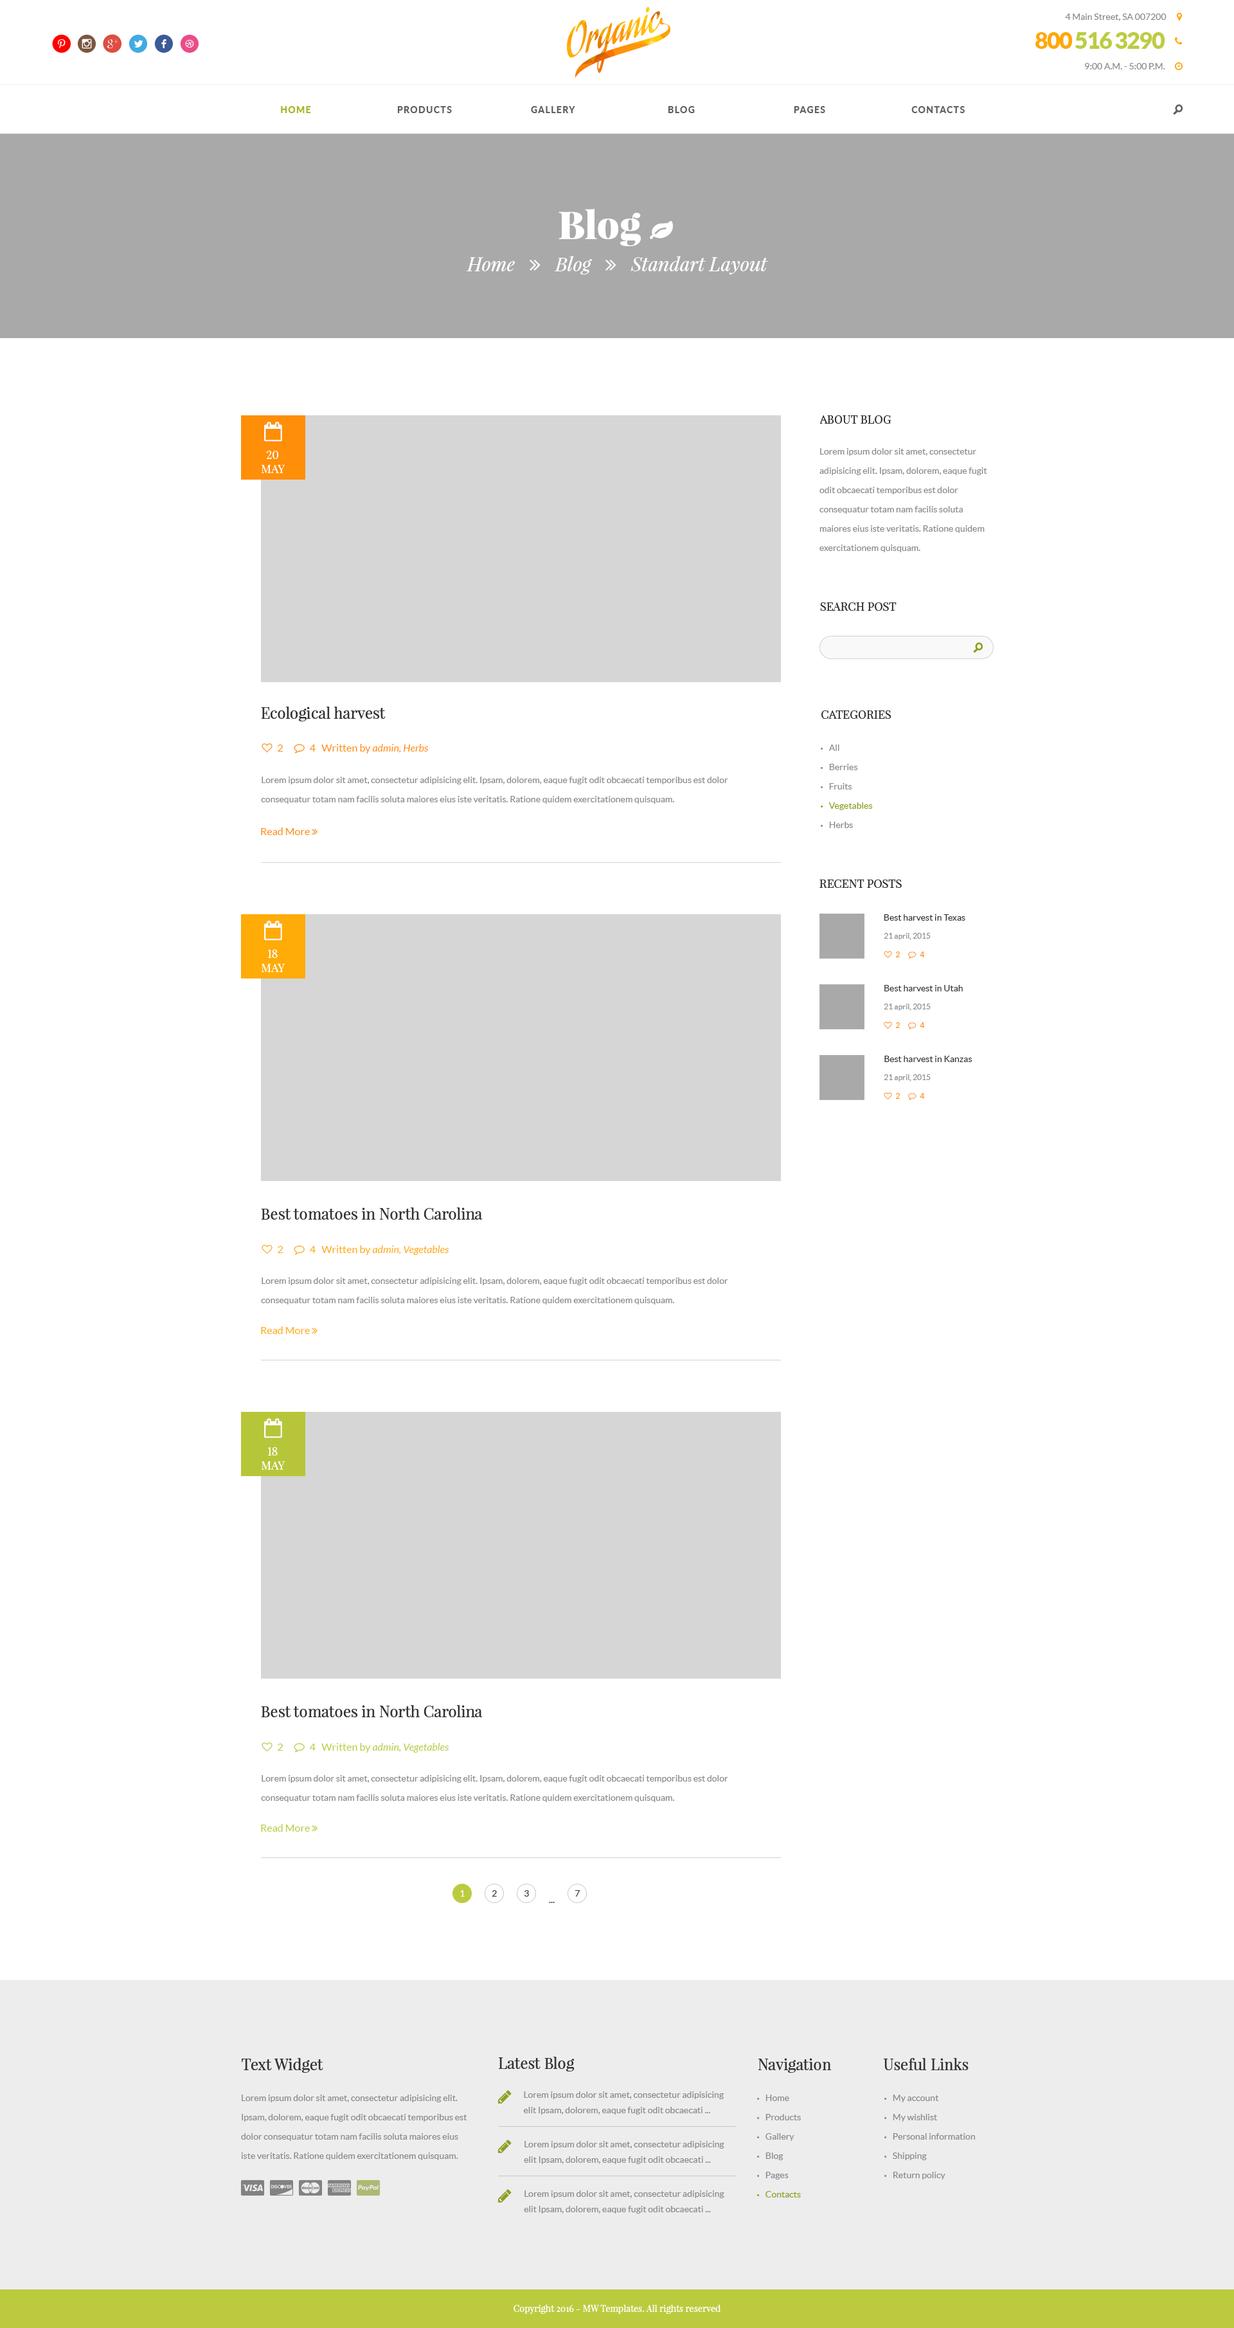
<style>
.page{position:relative;width:1234px;height:2328px;background:#ffffff}
.page>*{position:absolute;margin:0}
.t1{font:9px "Lato-Regular";color:#898989}
.t2{font:25.7px "SocialicoPlus";letter-spacing:0.2em;color:#ff0000}
.t3{font:25.7px "SocialicoPlus";letter-spacing:0.2em;color:#7c5641}
.t4{font:25.7px "SocialicoPlus";letter-spacing:0.2em;color:#dd4e41}
.t5{font:25.7px "Socialico";letter-spacing:0.2em;color:#41abe1}
.t6{font:25.7px "Socialico";letter-spacing:0.2em;color:#3d5a98}
.t7{font:25.7px "Socialico";letter-spacing:0.2em;color:#ea4c89}
.t8{font:23.1px "Lato-Black";letter-spacing:-0.05em;color:#bdcc41}
.t9{font:23.1px "Lato-Black";letter-spacing:-0.05em;color:#ffa800}
.t10{font:9px "Lato-Heavy";letter-spacing:0.1em;color:#a6b525;text-transform:uppercase}
.t11{font:9px "Lato-Heavy";letter-spacing:0.1em;color:#606060;text-transform:uppercase}
.t12{font:19.3px "SocialicoPlus";color:#606060;text-transform:uppercase}
.t13{font:11.6px "PlayfairDisplay-Regular";color:#333333;text-transform:uppercase}
.t14{font:9px/19.3px "Lato-Regular";color:#898989}
.t15{font:11.6px "PlayfairDisplay-Regular";color:#ffffff;text-transform:uppercase}
.t16{font:19.3px "SocialicoPlus";color:#909e1a;text-transform:uppercase}
.t17{font:15.4px "PlayfairDisplay-Regular";color:#333333}
.t18{font:9px/19.3px "Lato-Regular";color:#909e1a}
.t19{font:9px/19.3px "MyriadPro-Regular";color:#898989;text-transform:uppercase}
.t20{font:9px/19.3px "MyriadPro-Regular";color:#909e1a;text-transform:uppercase}
.t21{font:9px "Lato-Regular";color:#333333}
.t22{font:7.7px "Lato-Regular";color:#898989}
.t23{font:9px "Lato-Regular";color:#fffefe}
.t24{font:9px/15.4px "Lato-Regular";color:#898989}
.t25{font:9px "PlayfairDisplay-Regular";color:#ffffff}
</style>
<div class="page">
<p class="t1" style="left:1065px;top:14px;width:102px;height:7px">4 Main Street, SA 007200</p>
<p class="t2" style="left:52px;top:34px;width:147px;height:19px">p<span class="t3">i</span><span class="t4">h</span><span class="t5">l</span><span class="t6">f</span><span class="t7">d</span></p>
<p class="t8" style="left:1036px;top:32px;width:130px;height:17px"><span class="t9">800</span> 516 3290</p>
<p class="t1" style="left:1085px;top:63px;width:81px;height:6px">9:00 A.M. - 5:00 P.M.</p>
<p class="t10" style="left:281px;top:106px;width:30px;height:7px">Home</p>
<p class="t11" style="left:397px;top:106px;width:55px;height:7px">Products</p>
<p class="t11" style="left:531px;top:106px;width:44px;height:7px">Gallery</p>
<p class="t11" style="left:668px;top:106px;width:27px;height:7px">Blog</p>
<p class="t11" style="left:794px;top:106px;width:31px;height:7px">Pages</p>
<p class="t11" style="left:912px;top:106px;width:53px;height:7px">Contacts</p>
<p class="t12" style="left:1173px;top:104px;width:11px;height:10px">o</p>
<p class="t13" style="left:820px;top:415px;width:71px;height:9px">About blog</p>
<p class="t14" style="left:820px;top:448px;width:167px;height:104px">Lorem ipsum dolor sit amet, consectetur adipisicing elit. Ipsam, dolorem, eaque fugit odit obcaecati temporibus est dolor consequatur totam nam facilis soluta maiores eius iste veritatis. Ratione quidem exercitationem quisquam.</p>
<p class="t15" style="left:262px;top:451px;width:23px;height:22px;text-align:center">20<br>may</p>
<p class="t13" style="left:820px;top:602px;width:77px;height:9px">Search post</p>
<p class="t16" style="left:973px;top:642px;width:11px;height:10px">o</p>
<p class="t17" style="left:261px;top:706px;width:125px;height:15px">Ecological harvest</p>
<p class="t13" style="left:822px;top:710px;width:70px;height:9px">Categories</p>
<p class="t18" style="left:821px;top:744px;width:52px;height:84px"><span class="t19">•   </span><span class="t14">All<br></span><span class="t19">•   </span><span class="t14">Berries<br></span><span class="t19">•   </span><span class="t14">Fruits<br></span><span class="t20">•   </span>Vegetables<br><span class="t19">•   </span><span class="t14">Herbs</span></p>
<p class="t14" style="left:261px;top:777px;width:467px;height:27px">Lorem ipsum dolor sit amet, consectetur adipisicing elit. Ipsam, dolorem, eaque fugit odit obcaecati temporibus est dolor consequatur totam nam facilis soluta maiores eius iste veritatis. Ratione quidem exercitationem quisquam.</p>
<p class="t13" style="left:820px;top:879px;width:82px;height:9px">RECENT POSTS</p>
<p class="t21" style="left:884px;top:914px;width:82px;height:7px">Best harvest in Texas</p>
<p class="t22" style="left:884px;top:933px;width:47px;height:7px">21 april, 2015</p>
<p class="t15" style="left:262px;top:950px;width:23px;height:22px;text-align:center">18<br>may</p>
<p class="t21" style="left:885px;top:985px;width:78px;height:6px">Best harvest in Utah</p>
<p class="t22" style="left:884px;top:1004px;width:47px;height:7px">21 april, 2015</p>
<p class="t21" style="left:885px;top:1056px;width:88px;height:6px">Best harvest in Kanzas</p>
<p class="t22" style="left:884px;top:1074px;width:47px;height:7px">21 april, 2015</p>
<p class="t17" style="left:261px;top:1207px;width:222px;height:13px">Best tomatoes in North Carolina</p>
<p class="t14" style="left:261px;top:1277px;width:467px;height:27px">Lorem ipsum dolor sit amet, consectetur adipisicing elit. Ipsam, dolorem, eaque fugit odit obcaecati temporibus est dolor consequatur totam nam facilis soluta maiores eius iste veritatis. Ratione quidem exercitationem quisquam.</p>
<p class="t15" style="left:262px;top:1447px;width:23px;height:23px;text-align:center">18<br>may</p>
<p class="t17" style="left:261px;top:1705px;width:222px;height:12px">Best tomatoes in North Carolina</p>
<p class="t14" style="left:261px;top:1775px;width:467px;height:27px">Lorem ipsum dolor sit amet, consectetur adipisicing elit. Ipsam, dolorem, eaque fugit odit obcaecati temporibus est dolor consequatur totam nam facilis soluta maiores eius iste veritatis. Ratione quidem exercitationem quisquam.</p>
<p class="t23" style="left:460px;top:1890px;width:5px;height:6px">1</p>
<p class="t21" style="left:492px;top:1890px;width:5px;height:6px">2</p>
<p class="t21" style="left:524px;top:1890px;width:5px;height:6px">3</p>
<p class="t21" style="left:549px;top:1902px;width:6px;height:1px">...</p>
<p class="t21" style="left:575px;top:1890px;width:5px;height:6px">7</p>
<p class="t17" style="left:242px;top:2058px;width:81px;height:15px">Text Widget</p>
<p class="t17" style="left:499px;top:2056px;width:76px;height:15px">Latest Blog</p>
<p class="t17" style="left:759px;top:2058px;width:73px;height:15px">Navigation</p>
<p class="t17" style="left:884px;top:2058px;width:85px;height:12px">Useful Links</p>
<p class="t24" style="left:523px;top:2091px;width:201px;height:23px">Lorem ipsum dolor sit amet, consectetur adipisicing elit Ipsam, dolorem, eaque fugit odit obcaecati ...</p>
<p class="t14" style="left:241px;top:2094px;width:226px;height:66px">Lorem ipsum dolor sit amet, consectetur adipisicing elit. Ipsam, dolorem, eaque fugit odit obcaecati temporibus est dolor consequatur totam nam facilis soluta maiores eius iste veritatis. Ratione quidem exercitationem quisquam.</p>
<p class="t14" style="left:757px;top:2094px;width:44px;height:103px"><span class="t19">•   </span>Home<br><span class="t19">•   </span>Products<br><span class="t19">•   </span>Gallery<br><span class="t19">•   </span>Blog<br><span class="t19">•   </span>Pages<br><span class="t20">•   </span><span class="t18">Contacts</span></p>
<p class="t14" style="left:885px;top:2094px;width:90px;height:85px"><span class="t19">•   </span>My account<br><span class="t19">•   </span>My wishlist<br><span class="t19">•   </span>Personal information<br><span class="t19">•   </span>Shipping<br><span class="t19">•   </span>Return policy</p>
<p class="t24" style="left:524px;top:2141px;width:200px;height:23px">Lorem ipsum dolor sit amet, consectetur adipisicing elit Ipsam, dolorem, eaque fugit odit obcaecati ...</p>
<p class="t24" style="left:524px;top:2190px;width:200px;height:23px">Lorem ipsum dolor sit amet, consectetur adipisicing elit Ipsam, dolorem, eaque fugit odit obcaecati ...</p>
<p class="t25" style="left:514px;top:2304px;width:207px;height:10px">Copyright 2016 - MW Templates. All rights reserved</p>
</div>
